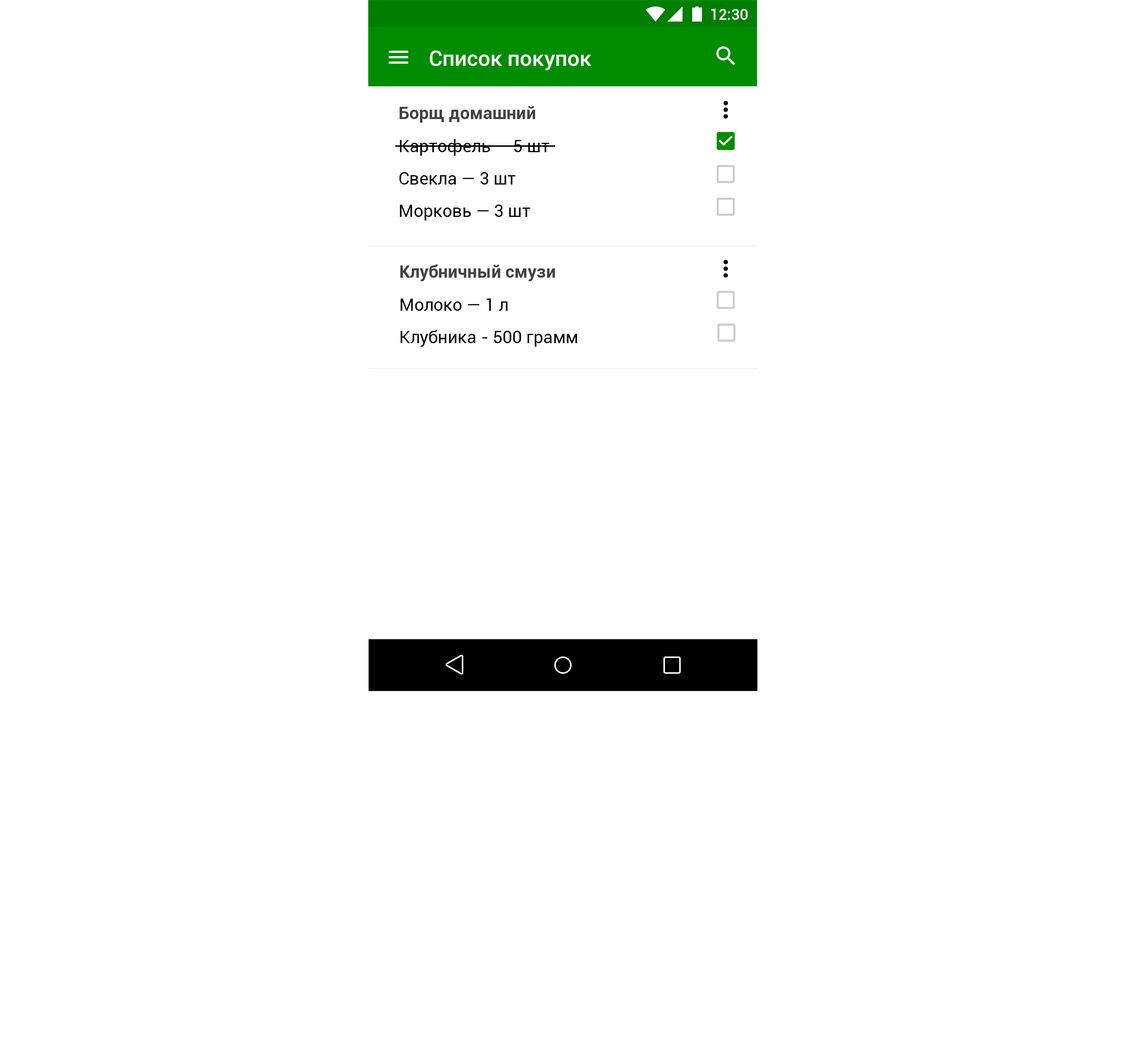
<style>
.page{position:relative;width:1126px;height:1059px;background:#ffffff}
.page>*{position:absolute;margin:0}
.t1{font:15.1px "Roboto-Medium";color:#ffffff}
.t2{font:21.6px "Roboto-Medium";color:#ffffff}
.t3{font:17.3px "Roboto-Bold";color:#424242}
.t4{font:17.3px/32.4px "Roboto-Regular";color:#000000}
</style>
<div class="page">
<p class="t1" style="left:711px;top:9px;width:36px;height:11px">12:30</p>
<p class="t2" style="left:430px;top:50px;width:161px;height:21px">Список покупок</p>
<p class="t3" style="left:399px;top:106px;width:136px;height:17px">Борщ домашний</p>
<p class="t4" style="left:399px;top:139px;width:150px;height:82px">Картофель — 5 шт<br>Свекла — 3 шт<br>Морковь — 3 шт</p>
<p class="t3" style="left:400px;top:264px;width:155px;height:17px">Клубничный смузи</p>
<p class="t4" style="left:401px;top:298px;width:176px;height:49px">Молоко — 1 л<br>Клубника - 500 грамм</p>
</div>
